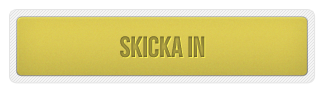
<style>
.page{position:relative;width:316px;height:94px;background:#ffffff}
.page>*{position:absolute;margin:0}
.t1{font:29px "BebasNeue";color:#938839}
</style>
<div class="page">
<p class="t1" style="left:120px;top:36px;width:85px;height:22px">SKICKA IN</p>
</div>
